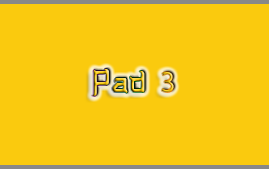
<style>
.page{position:relative;width:269px;height:169px;background:#faca0e}
.page>*{position:absolute;margin:0}
.t1{font:30px "MusicWarrior";scale:0.97 1}
.t2{font:30px "MyriadPro-Regular";scale:0.97 1}
</style>
<div class="page">
<p class="t1" style="left:92px;top:69px;width:82px;height:27px">Pad <span class="t2">3</span></p>
</div>
